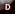
<style>
.page{position:relative;width:15px;height:14px}
.page>*{position:absolute;margin:0}
.t1{font:8px "MyriadPro-Semibold";color:#ffffff}
</style>
<div class="page">
<p class="t1" style="left:5px;top:4px;width:6px;height:6px">D</p>
</div>
